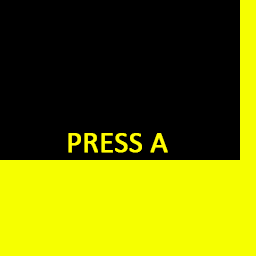
<style>
.page{position:relative;width:256px;height:256px;background:#000000}
.page>*{position:absolute;margin:0}
.t1{font:29.5px "Calibri";color:#fffc00;font-weight:bold}
</style>
<div class="page">
<p class="t1" style="left:68px;top:133px;width:100px;height:20px">PRESS A</p>
</div>
